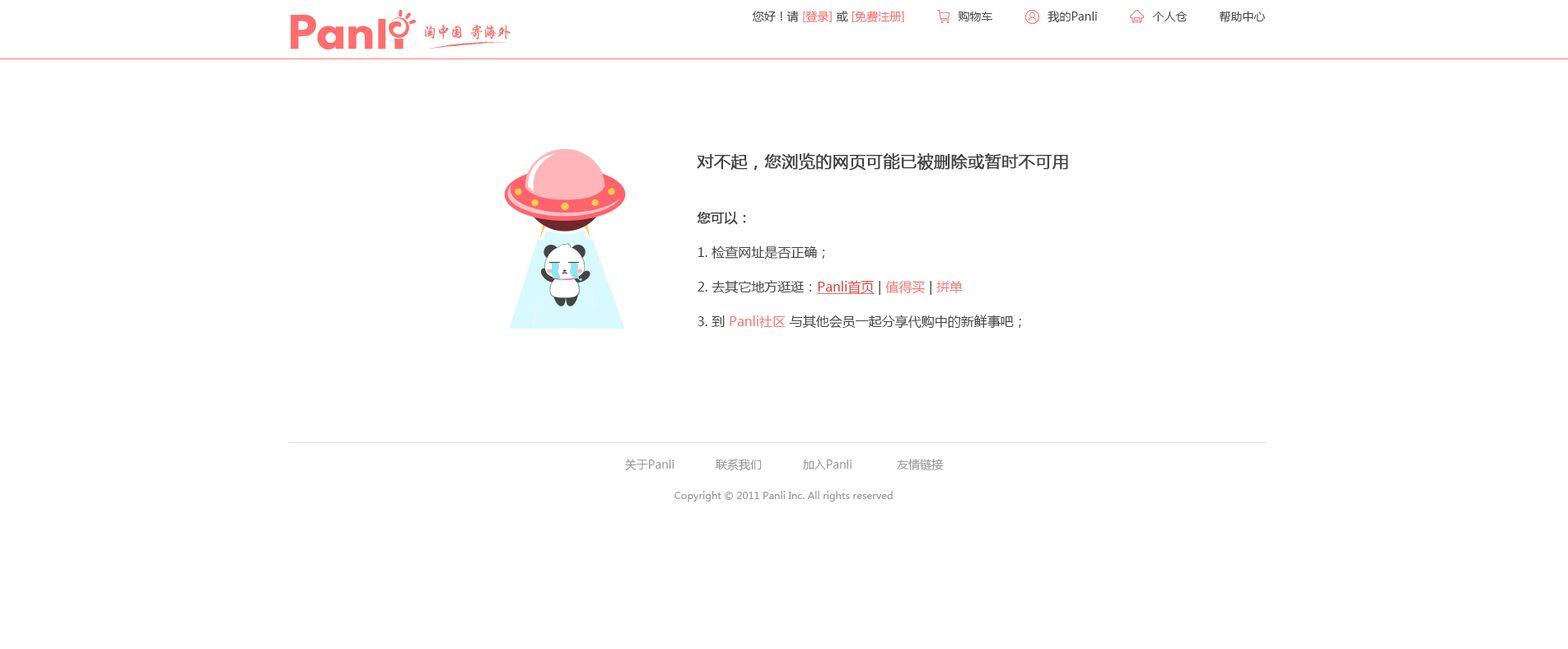
<style>
.page{position:relative;width:1568px;height:649px;background:#ffffff}
.page>*{position:absolute;margin:0}
.t1{font:11.5px "MicrosoftYaHei";color:#ff6e6e}
.t2{font:11.5px "MicrosoftYaHei";color:#444444}
.t3{font:16.5px "MicrosoftYaHei";color:#444444;font-weight:bold}
.t4{font:13.2px/34.6px "MicrosoftYaHei";color:#444444}
.t5{font:13.2px/34.6px "MicrosoftYaHei";color:#444444;font-weight:bold}
.t6{font:13.2px/34.6px "MicrosoftYaHei";color:#e23d3d;text-decoration:underline}
.t7{font:13.2px/34.6px "MicrosoftYaHei";color:#ff7575}
.t8{font:11.5px "MicrosoftYaHei";color:#999999}
.t9{font:9.9px "MicrosoftYaHei";color:#999999}
</style>
<div class="page">
<p class="t1" style="left:752px;top:11px;width:152px;height:12px"><span class="t2">您好！请 </span>[登录]<span class="t2"> 或 </span>[免费注册]</p>
<p class="t2" style="left:958px;top:12px;width:35px;height:9px">购物车</p>
<p class="t2" style="left:1048px;top:11px;width:49px;height:12px">我的Panli</p>
<p class="t2" style="left:1152px;top:12px;width:36px;height:9px">个人仓</p>
<p class="t2" style="left:1219px;top:11px;width:47px;height:12px">帮助中心</p>
<p class="t3" style="left:697px;top:153px;width:371px;height:17px">对不起，您浏览的网页可能已被删除或暂时不可用</p>
<p class="t4" style="left:697px;top:212px;width:324px;height:117px"><span class="t5">您可以：<br></span>1. 检查网址是否正确；<br>2. 去其它地方逛逛：<span class="t6">Panli首页 </span>|<span class="t7"> 值得买 </span>| <span class="t7">拼单<br></span>3. 到 <span class="t7">Panli社区</span> 与其他会员一起分享代购中的新鲜事吧；</p>
<p class="t8" style="left:625px;top:459px;width:318px;height:12px">关于Panli            联系我们            加入Panli             友情链接</p>
<p class="t9" style="left:674px;top:491px;width:219px;height:11px">Copyright © 2011 Panli Inc. All rights reserved</p>
</div>
